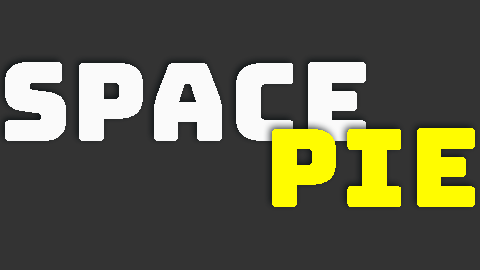
<style>
.page{position:relative;width:480px;height:270px;background:#333333}
.page>*{position:absolute;margin:0}
.t1{font:109px "Bungee-Regular";letter-spacing:0.02em;color:#fafafa}
.t2{font:109px "Bungee-Regular";letter-spacing:0.02em;color:#fffc00}
</style>
<div class="page">
<p class="t1" style="left:5px;top:62px;width:361px;height:79px">Space</p>
<p class="t2" style="left:272px;top:128px;width:203px;height:79px">Pie</p>
</div>
